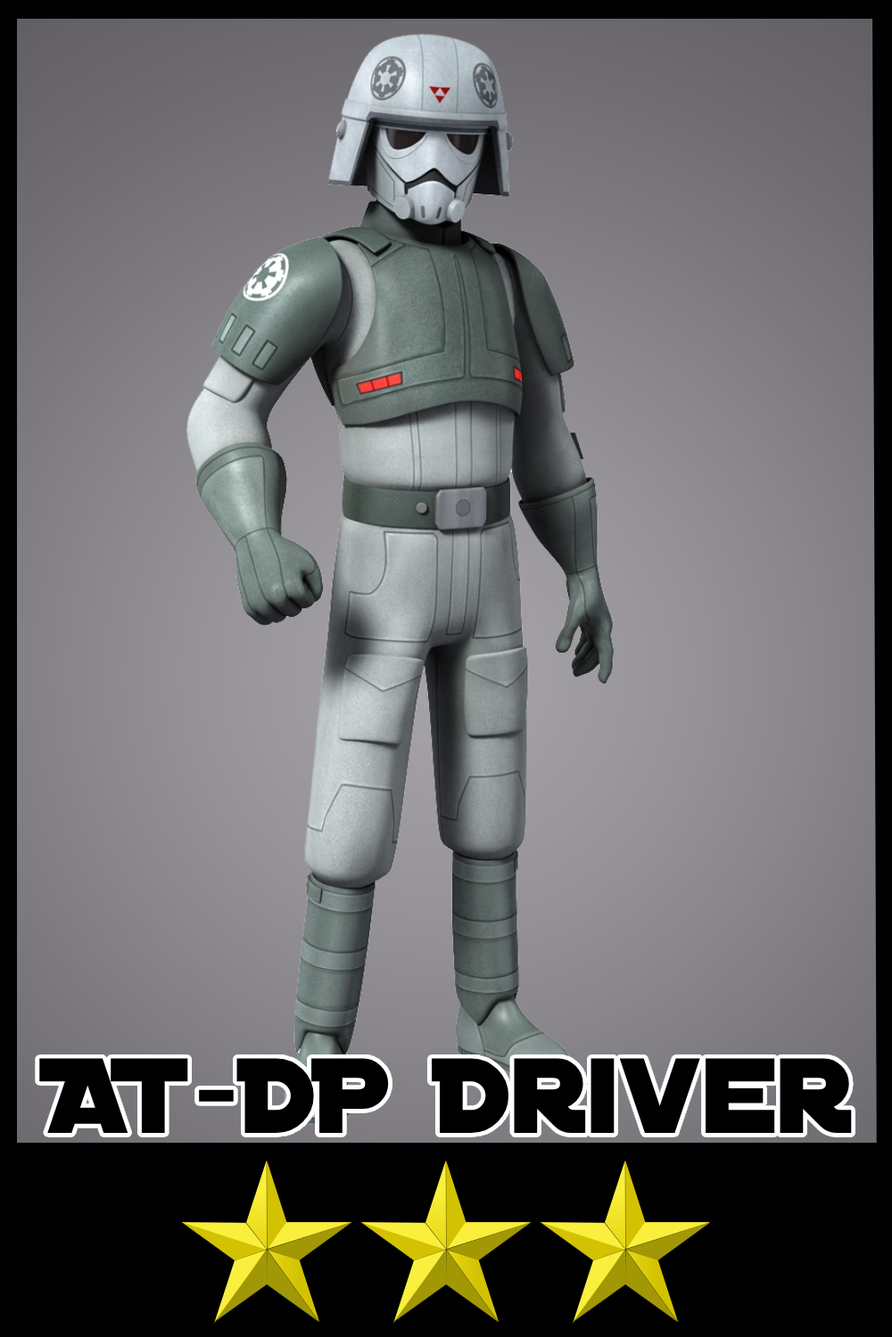
<style>
.page{position:relative;width:892px;height:1337px}
.page>*{position:absolute;margin:0}
.t1{font:114.6px "DistantGalaxy";color:#000000}
</style>
<div class="page">
<p class="t1" style="left:39px;top:1058px;width:812px;height:75px">AT-DP Driver</p>
</div>
